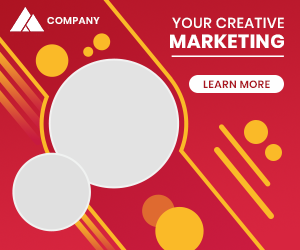
<style>
.page{position:relative;width:300px;height:250px}
.page>*{position:absolute;margin:0}
.t1{font:9.9px "Poppins-SemiBold";letter-spacing:0.025em;color:#fefefe;text-transform:uppercase}
.t2{font:14.4px "Poppins-Medium";letter-spacing:0.025em;color:#ffffff}
.t3{font:19px "Poppins-Bold";letter-spacing:0.025em;color:#ffffff}
.t4{font:10.5px "Poppins-SemiBold";letter-spacing:0.025em;color:#aa151f}
</style>
<div class="page">
<p class="t1" style="left:47px;top:17px;width:53px;height:7px">company</p>
<p class="t2" style="left:172px;top:17px;width:112px;height:11px">YOUR CREATIVE</p>
<p class="t3" style="left:170px;top:34px;width:114px;height:14px">MARKETING</p>
<p class="t4" style="left:203px;top:80px;width:67px;height:8px">LEARN MORE</p>
</div>
